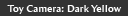
<style>
.page{position:relative;width:128px;height:16px;background:#333333}
.page>*{position:absolute;margin:0}
.t1{font:9.6px "AmiraParadiso";letter-spacing:0.05em;color:#ffffff}
</style>
<div class="page">
<p class="t1" style="left:7px;top:5px;width:115px;height:9px">Toy Camera: Dark Yellow</p>
</div>
